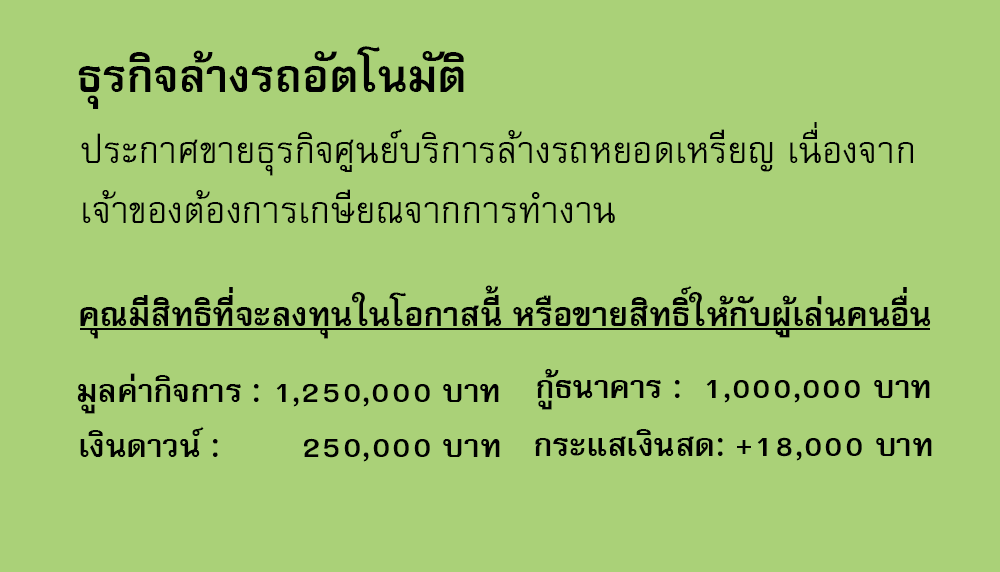
<style>
.page{position:relative;width:1000px;height:572px;background:#aad178}
.page>*{position:absolute;margin:0}
.t1{font:64px "FreesiaUPCBold";color:#000000}
.t2{font:51px/60px "FreesiaUPC";color:#000000}
.t3{font:47px "FreesiaUPCBold";color:#000000}
.t4{font:45px "FreesiaUPCBold";color:#000000}
</style>
<div class="page">
<p class="t1" style="left:78px;top:46px;width:386px;height:63px">ธุรกิจล้างรถอัตโนมัติ</p>
<p class="t2" style="left:81px;top:122px;width:832px;height:101px">ประกาศขายธุรกิจศูนย์บริการล้างรถหยอดเหรียญ เนื่องจาก<br>เจ้าของต้องการเกษียณจากการทำงาน</p>
<p class="t3" style="left:80px;top:285px;width:851px;height:54px">คุณมีสิทธิที่จะลงทุนในโอกาสนี้ หรือขายสิทธิ์ให้กับผู้เล่นคนอื่น</p>
<p class="t4" style="left:77px;top:373px;width:422px;height:41px">มูลค่ากิจการ : 1,250,000 บาท</p>
<p class="t4" style="left:537px;top:369px;width:393px;height:41px">กู้ธนาคาร :  1,000,000 บาท</p>
<p class="t4" style="left:80px;top:426px;width:420px;height:36px">เงินดาวน์ :        250,000 บาท</p>
<p class="t4" style="left:535px;top:429px;width:397px;height:32px">กระแสเงินสด: +18,000 บาท</p>
</div>
